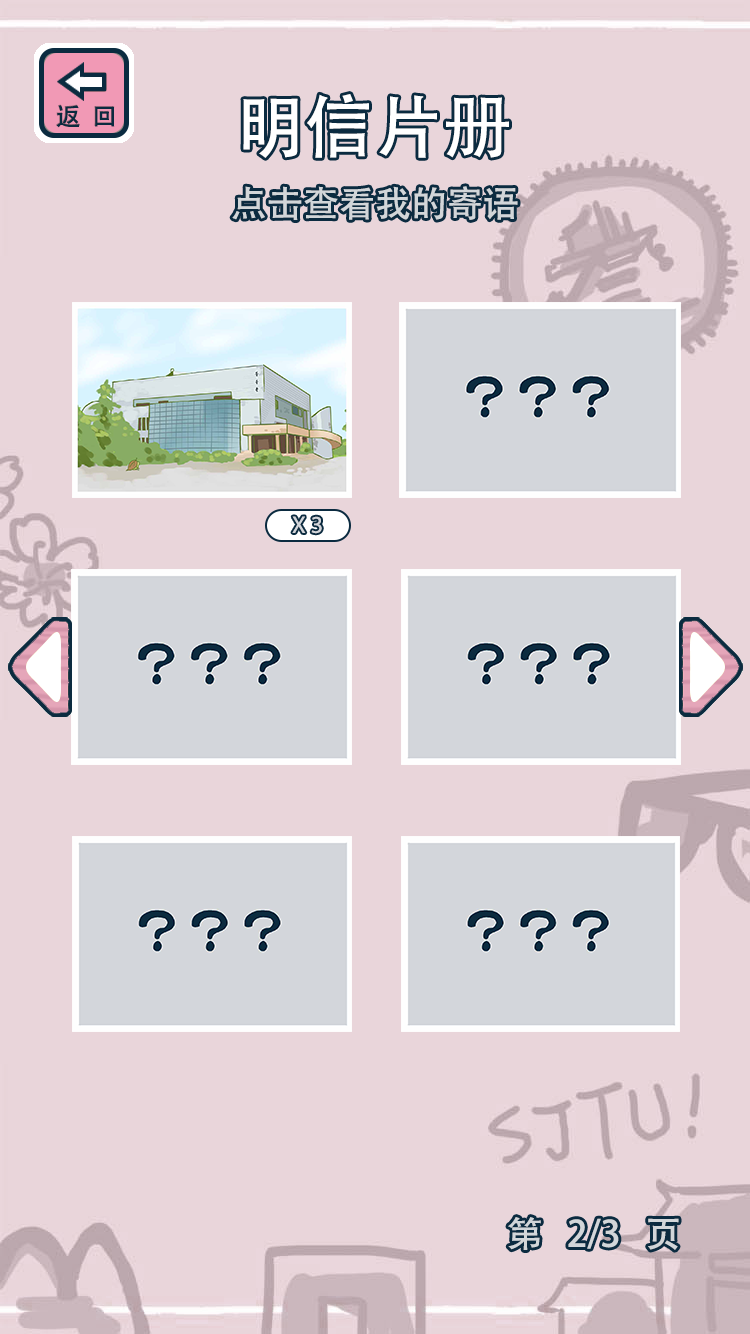
<style>
.page{position:relative;width:750px;height:1334px;background:#e9d5da}
.page>*{position:absolute;margin:0}
.t1{font:69px "AdobeHeitiStd-Regular";color:#ffffff}
.t2{font:36px "AdobeHeitiStd-Regular";color:#d2d6d9}
.t3{font:24px "MyriadPro-Regular";color:#d3d6db}
</style>
<div class="page">
<p class="t1" style="left:243px;top:94px;width:266px;height:64px">明信片册</p>
<p class="t2" style="left:232px;top:186px;width:286px;height:34px">点击查看我的寄语</p>
<p class="t3" style="left:292px;top:516px;width:30px;height:18px">X 3</p>
<p class="t2" style="left:508px;top:1217px;width:171px;height:33px">第   2/3   页</p>
</div>
